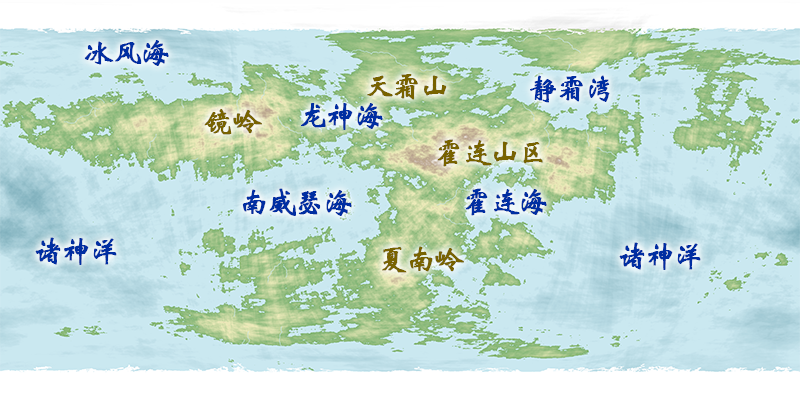
<style>
.page{position:relative;width:800px;height:400px}
.page>*{position:absolute;margin:0}
.t1{font:30px "STXinwei";letter-spacing:-0.1em;color:#002ea2;font-weight:bold}
.t2{font:30px "STXinwei";letter-spacing:-0.1em;color:#786300;font-weight:bold}
</style>
<div class="page">
<p class="t1" style="left:84px;top:40px;width:85px;height:26px">冰风海</p>
<p class="t2" style="left:367px;top:74px;width:80px;height:26px">天霜山</p>
<p class="t1" style="left:530px;top:75px;width:80px;height:28px">静霜湾</p>
<p class="t2" style="left:204px;top:109px;width:58px;height:26px">镜岭</p>
<p class="t1" style="left:301px;top:103px;width:82px;height:27px">龙神海</p>
<p class="t2" style="left:437px;top:139px;width:106px;height:28px">霍连山区</p>
<p class="t1" style="left:242px;top:188px;width:110px;height:28px">南威瑟海</p>
<p class="t1" style="left:465px;top:188px;width:82px;height:28px">霍连海</p>
<p class="t1" style="left:35px;top:237px;width:82px;height:28px">诸神洋</p>
<p class="t2" style="left:382px;top:246px;width:82px;height:27px">夏南岭</p>
<p class="t1" style="left:619px;top:242px;width:82px;height:28px">诸神洋</p>
</div>
